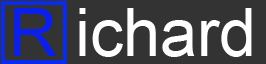
<style>
.page{position:relative;width:266px;height:64px;background:#333333}
.page>*{position:absolute;margin:0}
.t1{font:66.7px "ArialMT";color:#0a1fe9}
.t2{font:66.7px "ArialMT";color:#ffffff}
</style>
<div class="page">
<p class="t1" style="left:14px;top:8px;width:43px;height:48px">R</p>
<p class="t2" style="left:79px;top:8px;width:173px;height:49px">ichard</p>
</div>
